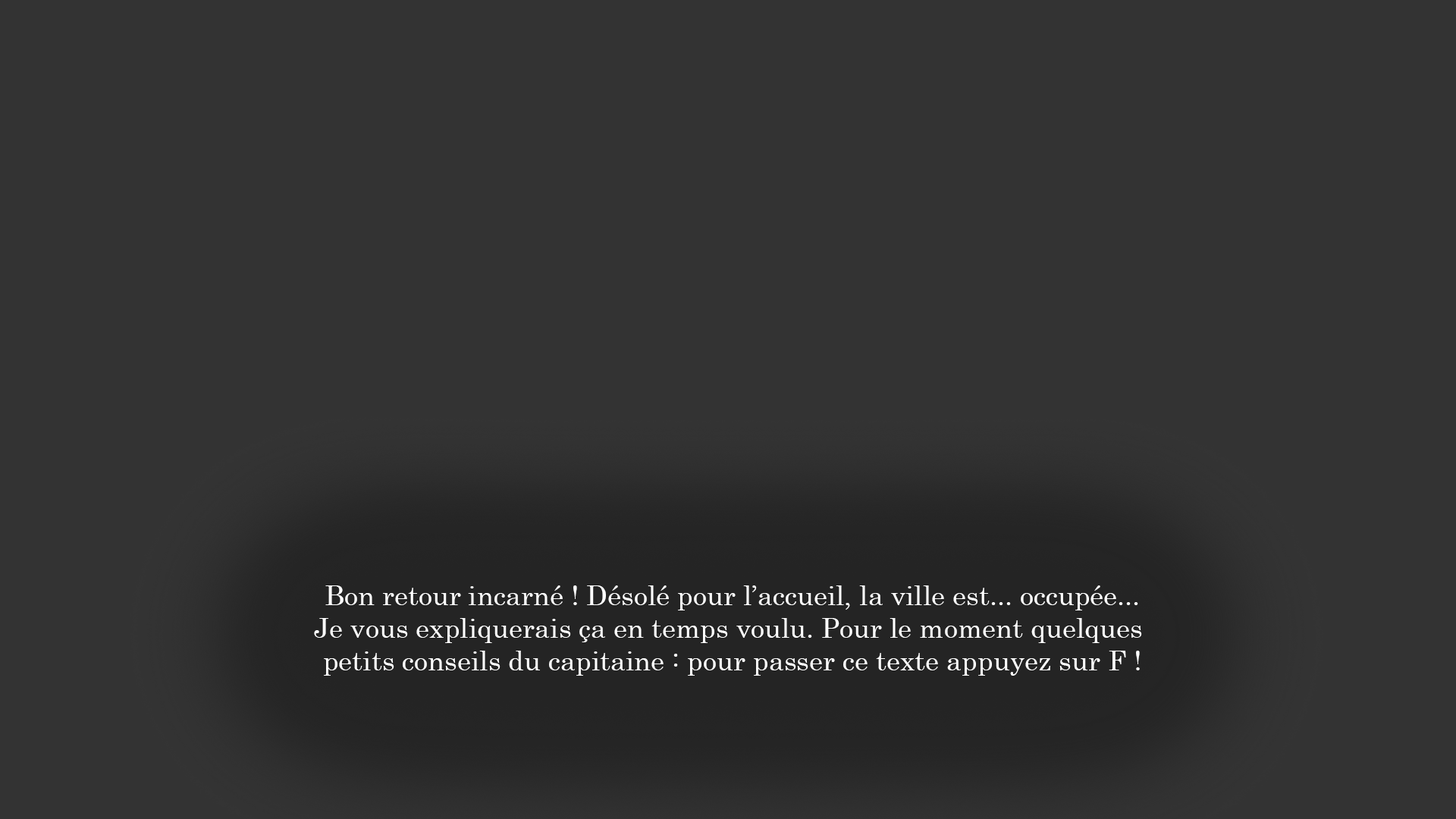
<style>
.page{position:relative;width:1456px;height:819px;background:#333333}
.page>*{position:absolute;margin:0}
.t1{font:27.3px "Century";color:#ffffff}
</style>
<div class="page">
<p class="t1" style="left:314px;top:585px;width:828px;height:91px;text-align:center">Bon retour incarné ! Désolé pour l’accueil, la ville est... occupée...<br>Je vous expliquerais ça en temps voulu. Pour le moment quelques <br>petits conseils du capitaine : pour passer ce texte appuyez sur F !</p>
</div>
